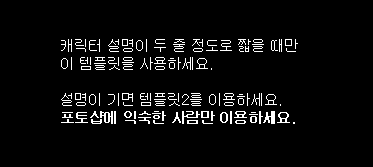
<style>
.page{position:relative;width:373px;height:167px;background:#000000}
.page>*{position:absolute;margin:0}
.t1{font:14px/18px "Gulim";color:#ffffff}
.t2{font:14px/18px "Gulim";color:#ffffff;font-weight:bold}
</style>
<div class="page">
<p class="t1" style="left:61px;top:39px;width:237px;height:85px">캐릭터 설명이 두 줄 정도로 짧을 때만<br>이 템플릿을 사용하세요.<br><br>설명이 기면 템플릿2를 이용하세요.<br><span class="t2">포토샵에 익숙한 사람만 이용하세요.</span></p>
</div>
